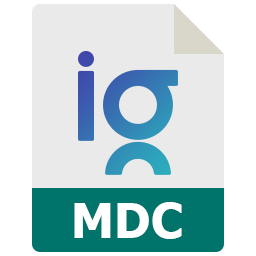
<style>
.page{position:relative;width:256px;height:256px;background:#eaeaea}
.page>*{position:absolute;margin:0}
.t1{font:48px "Tahoma-Bold";color:#ffffff}
</style>
<div class="page">
<p class="t1" style="left:74px;top:202px;width:108px;height:37px">MDC</p>
</div>
